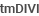
<style>
.page{position:relative;width:39px;height:16px;background:#ffffff}
.page>*{position:absolute;margin:0}
.t1{font:13px "Roboto-Medium";color:#4a4a4a}
</style>
<div class="page">
<p class="t1" style="left:0px;top:4px;width:39px;height:9px">tmDIVI</p>
</div>
